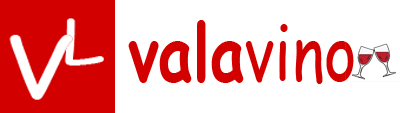
<style>
.page{position:relative;width:400px;height:113px;background:#ffffff}
.page>*{position:absolute;margin:0}
.t1{font:77.7px "ComicSansMS-Bold";color:#d30000;scale:0.8 1}
.t2{font:77.7px "ComicSansMS";color:#d30000;scale:0.8 1}
</style>
<div class="page">
<p class="t1" style="left:128px;top:20px;width:226px;height:64px">vala<span class="t2">vino</span></p>
</div>
